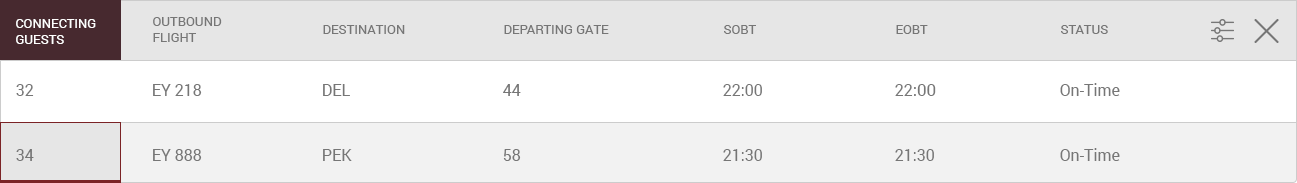
<style>
.page{position:relative;width:1297px;height:183px;background:#ffffff}
.page>*{position:absolute;margin:0}
.t1{font:13px "Roboto-Regular";color:#767676;text-transform:uppercase}
.t2{font:13px "Roboto-Regular";color:#ffffff;text-transform:uppercase}
.t3{font:16px "Roboto-Regular";color:#767676}
.t4{font:17px "Roboto-Regular";color:#767676}
</style>
<div class="page">
<p class="t1" style="left:153px;top:17px;width:69px;height:25px">Outbound<br>Flight</p>
<p class="t2" style="left:16px;top:19px;width:80px;height:25px">Connecting<br>Guests</p>
<p class="t1" style="left:323px;top:25px;width:82px;height:9px">Destination</p>
<p class="t1" style="left:504px;top:25px;width:105px;height:9px">Departing Gate</p>
<p class="t1" style="left:724px;top:25px;width:32px;height:9px">SOBT</p>
<p class="t1" style="left:896px;top:25px;width:32px;height:9px">EOBT</p>
<p class="t1" style="left:1061px;top:25px;width:47px;height:9px">Status</p>
<p class="t3" style="left:16px;top:84px;width:18px;height:12px">32</p>
<p class="t3" style="left:153px;top:84px;width:49px;height:12px">EY 218</p>
<p class="t3" style="left:323px;top:84px;width:27px;height:12px">DEL</p>
<p class="t3" style="left:503px;top:84px;width:18px;height:12px">44</p>
<p class="t3" style="left:723px;top:84px;width:39px;height:12px">22:00</p>
<p class="t4" style="left:895px;top:84px;width:41px;height:12px"><span class="t3">22</span>:00</p>
<p class="t3" style="left:1060px;top:83px;width:60px;height:13px">On-Time</p>
<p class="t3" style="left:16px;top:149px;width:18px;height:12px">34</p>
<p class="t3" style="left:153px;top:149px;width:49px;height:12px">EY 888</p>
<p class="t3" style="left:323px;top:149px;width:29px;height:12px">PEK</p>
<p class="t3" style="left:503px;top:149px;width:18px;height:12px">58</p>
<p class="t3" style="left:723px;top:149px;width:39px;height:12px">21:30</p>
<p class="t3" style="left:895px;top:149px;width:39px;height:12px">21:30</p>
<p class="t3" style="left:1060px;top:148px;width:60px;height:13px">On-Time</p>
</div>
